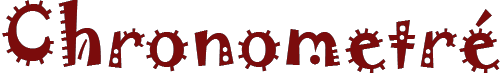
<style>
.page{position:relative;width:501px;height:74px;background:#ffffff}
.page>*{position:absolute;margin:0}
.t1{font:75px "Jokerman-Regular";color:#7b0c0c}
</style>
<div class="page">
<p class="t1" style="left:2px;top:0px;width:498px;height:73px">Chronometré</p>
<p class="t1" style="left:2px;top:0px;width:498px;height:73px">Chronometré</p>
</div>
